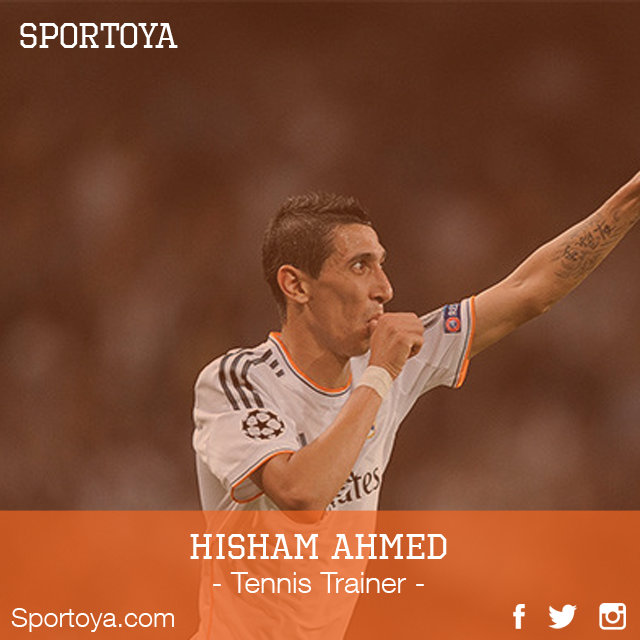
<style>
.page{position:relative;width:640px;height:640px}
.page>*{position:absolute;margin:0}
.t1{font:36px "OctinSportsRg-Regular";color:#ffffff}
.t2{font:30px "HelveticaNeueLTCom-Lt";color:#ffffff}
.t3{font:27px "HelveticaNeueLTCom-Lt";color:#ffffff}
</style>
<div class="page">
<p class="t1" style="left:20px;top:23px;width:158px;height:25px">SPORTOYa</p>
<p class="t1" style="left:190px;top:534px;width:257px;height:25px">Hisham Ahmed</p>
<p class="t2" style="left:213px;top:572px;width:211px;height:21px">- Tennis Trainer -</p>
<p class="t3" style="left:11px;top:608px;width:163px;height:24px">Sportoya.com</p>
</div>
